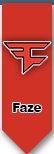
<style>
.page{position:relative;width:54px;height:154px;background:#d03226}
.page>*{position:absolute;margin:0}
.t1{font:11.7px "Arial-Black";letter-spacing:-0.01em;color:#000000}
</style>
<div class="page">
<p class="t1" style="left:13px;top:103px;width:29px;height:9px">Faze</p>
</div>
